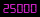
<style>
.page{position:relative;width:40px;height:17px;background:#000000}
.page>*{position:absolute;margin:0}
.t1{font:14px "DS-Digital";color:#ce22c4}
</style>
<div class="page">
<p class="t1" style="left:3px;top:4px;width:34px;height:9px">25000</p>
</div>
